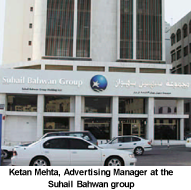
<style>
.page{position:relative;width:191px;height:190px}
.page>*{position:absolute;margin:0}
.t1{font:9px/12px "Arial-BoldMT";letter-spacing:-0.025em;color:#000000}
</style>
<div class="page">
<p class="t1" style="left:9px;top:168px;width:164px;height:21px;text-align:center">Ketan Mehta, Advertising Manager at the<br>Suhail Bahwan group</p>
</div>
